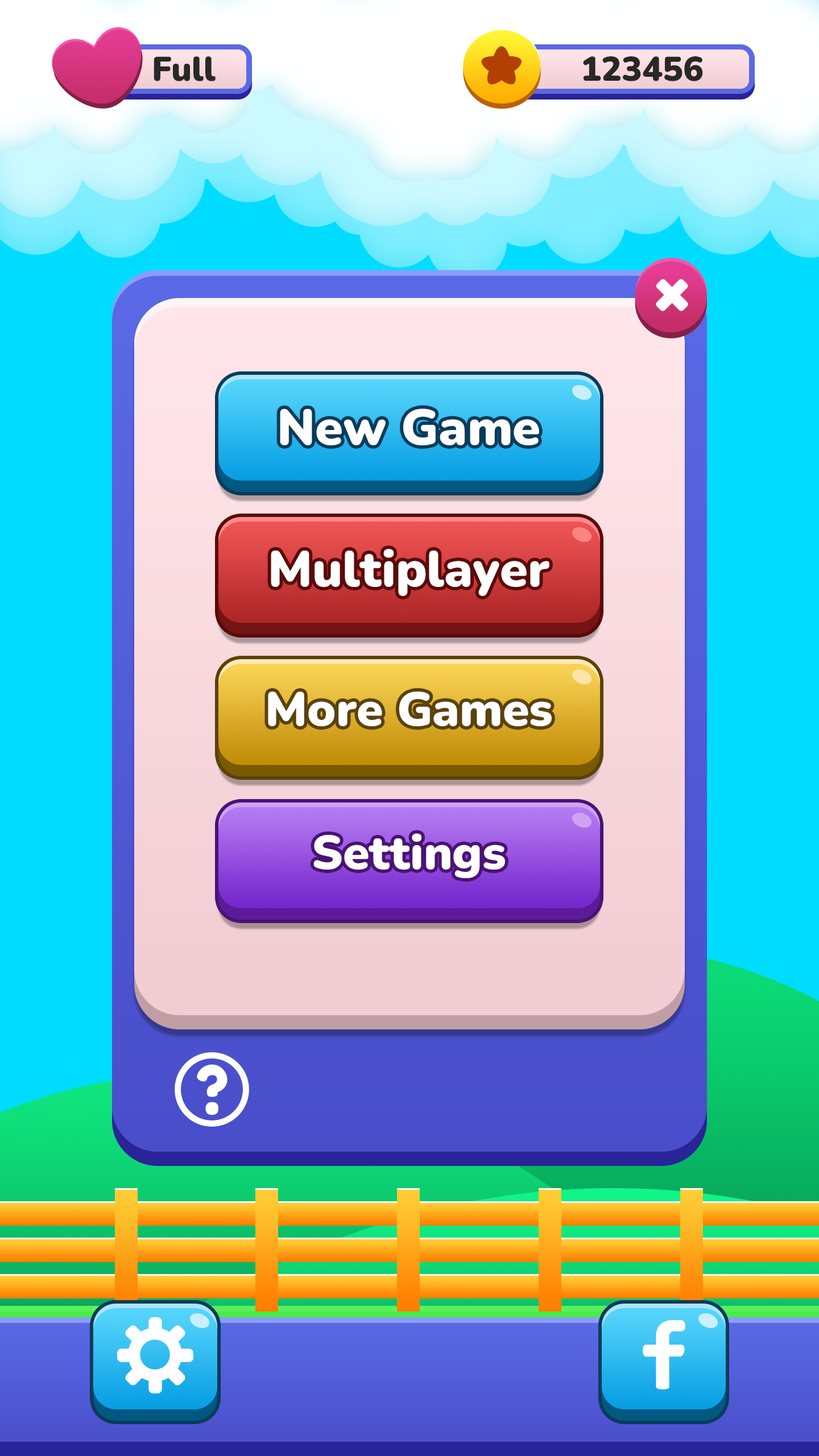
<style>
.page{position:relative;width:819px;height:1456px}
.page>*{position:absolute;margin:0}
.t1{font:34.1px "Nunito-Black";color:#282828}
.t2{font:50.3px "Nunito-Black";color:#ffffff}
.t3{font:47.8px "Nunito-Black";color:#ffffff}
</style>
<div class="page">
<p class="t1" style="left:154px;top:56px;width:62px;height:25px">Full</p>
<p class="t1" style="left:583px;top:56px;width:120px;height:25px">123456</p>
<p class="t2" style="left:280px;top:408px;width:259px;height:37px">New Game</p>
<p class="t2" style="left:271px;top:549px;width:278px;height:47px">Multiplayer</p>
<p class="t3" style="left:268px;top:691px;width:284px;height:35px">More Games</p>
<p class="t3" style="left:313px;top:833px;width:192px;height:45px">Settings</p>
</div>
